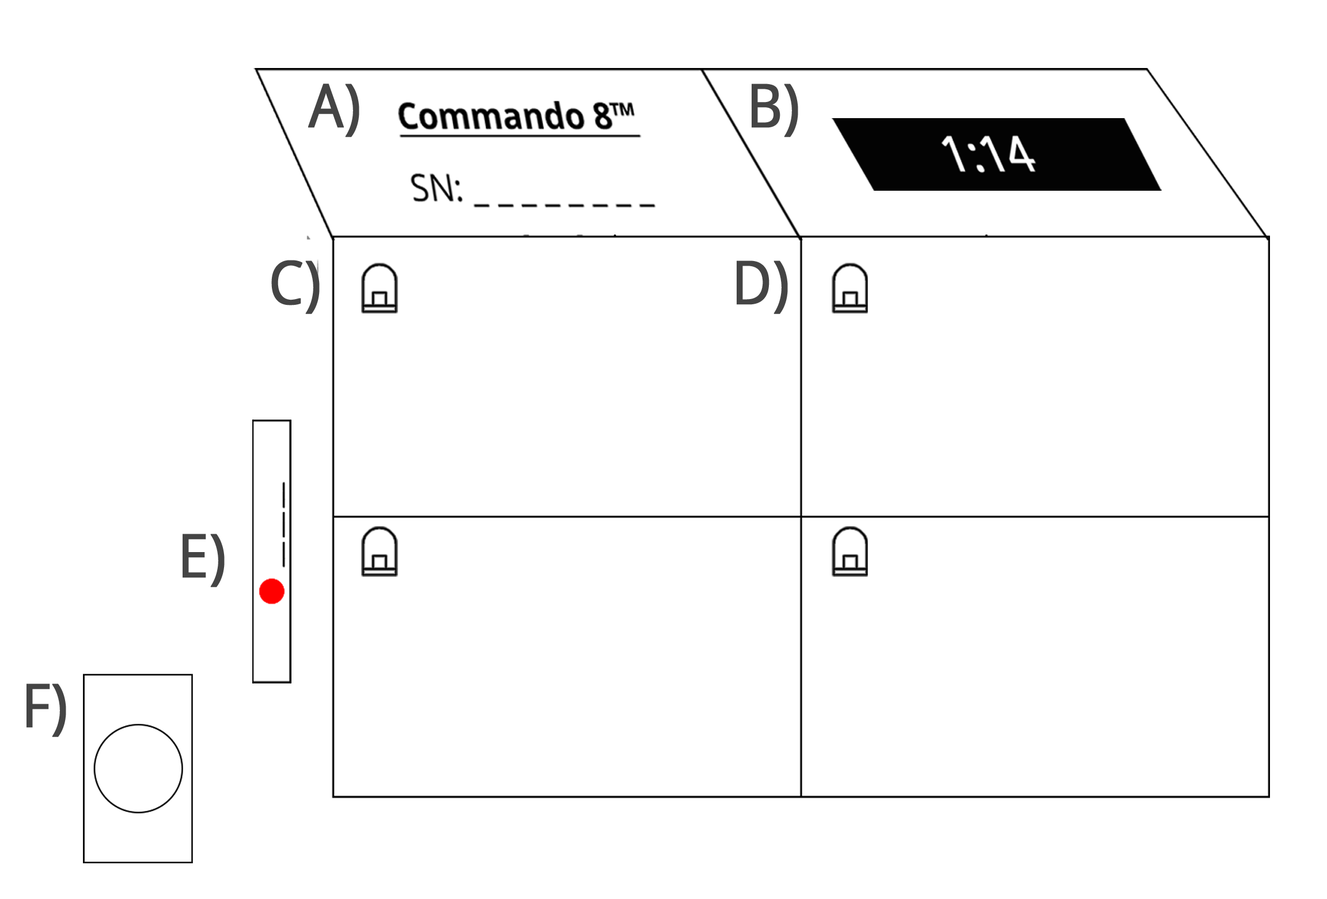
<style>
.page{position:relative;width:1327px;height:899px;background:#ffffff}
.page>*{position:absolute;margin:0}
.t1{font:60px "OpenSans";color:#444444;font-weight:bold;scale:0.9 1}
.t2{font:30px "OpenSans";color:#444444;font-weight:bold;scale:0.9 1}
</style>
<div class="page">
<p class="t1" style="left:308px;top:84px;width:51px;height:53px">A)</p>
<p class="t2" style="left:752px;top:84px;width:46px;height:53px;text-align:center">B)</p>
<p class="t2" style="left:271px;top:260px;width:49px;height:54px;text-align:center">C)</p>
<p class="t2" style="left:737px;top:260px;width:51px;height:54px;text-align:center">D)</p>
<p class="t2" style="left:183px;top:533px;width:42px;height:54px;text-align:center">E)</p>
<p class="t2" style="left:26px;top:683px;width:40px;height:54px;text-align:center">F)</p>
</div>
